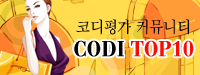
<style>
.page{position:relative;width:200px;height:75px}
.page>*{position:absolute;margin:0}
.t1{font:17px "SandTm";color:#000004;scale:0.91 1}
.t2{font:21.2px "BauerBodoni-Bold";color:#fb0b05;font-weight:bold;scale:0.91 1}
.t3{font:21.2px "BauerBodoni-Bold";color:#000004;font-weight:bold;scale:0.91 1}
</style>
<div class="page">
<p class="t1" style="left:76px;top:19px;width:113px;height:16px">코디평가 커뮤니티</p>
<p class="t2" style="left:74px;top:40px;width:120px;height:17px"><span class="t3">CODI </span>TOP10</p>
</div>
